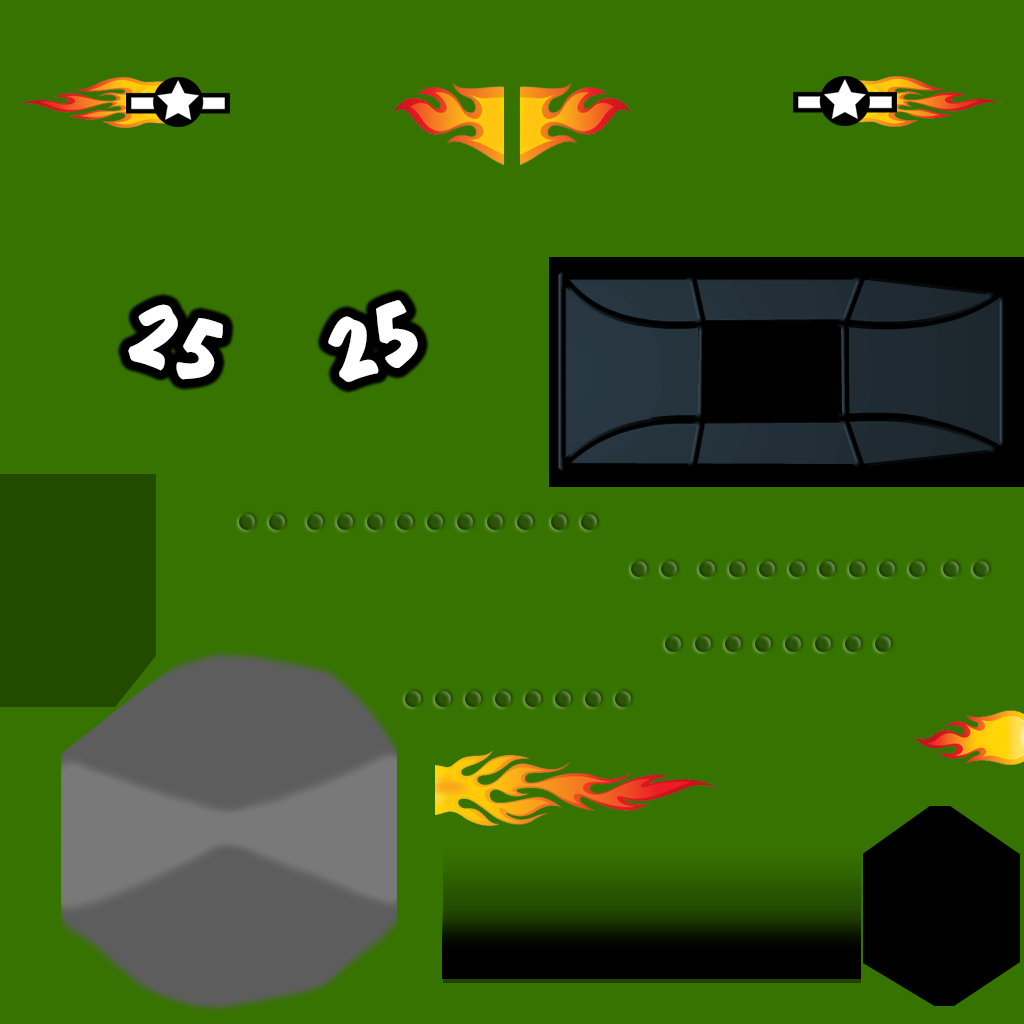
<style>
.page{position:relative;width:1024px;height:1024px;background:#367300}
.page>*{position:absolute;margin:0}
.t1{font:96.5px "DomBoldBT-Regular";color:#ffffff;font-variant:small-caps}
</style>
<div class="page">
<p class="t1" style="left:128px;top:304px;width:95px;height:76px;rotate:19deg">25</p>
<p class="t1" style="left:328px;top:300px;width:90px;height:82px;rotate:-17deg">25</p>
</div>
